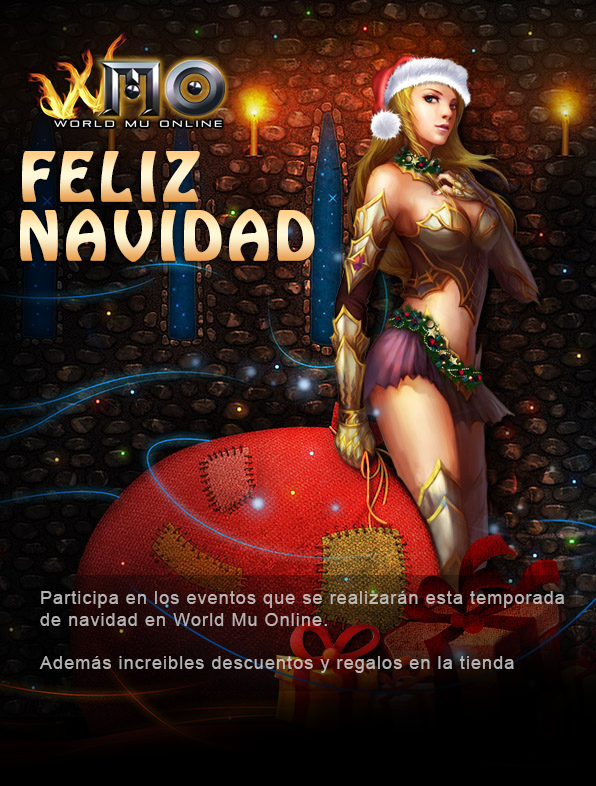
<style>
.page{position:relative;width:596px;height:786px}
.page>*{position:absolute;margin:0}
.t1{font:60px "HoboStd";letter-spacing:0.06em;font-weight:bold}
.t2{font:18px "ArialMT";letter-spacing:0.06em;color:#b6b3b3}
</style>
<div class="page">
<p class="t1" style="left:22px;top:151px;width:178px;height:51px">FELIZ</p>
<p class="t1" style="left:20px;top:209px;width:295px;height:53px">NAVIDAD</p>
<p class="t2" style="left:39px;top:591px;width:525px;height:82px">Participa en los eventos que se realizarán esta temporada<br>de navidad en World Mu Online.<br><br>Además increibles descuentos y regalos en la tienda</p>
</div>
